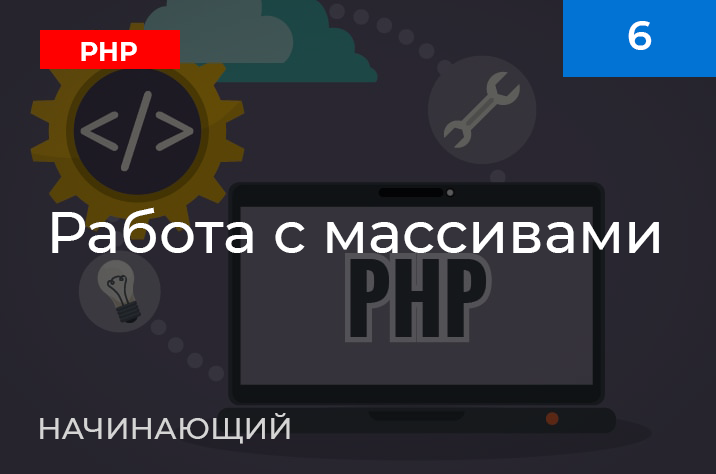
<style>
.page{position:relative;width:716px;height:474px}
.page>*{position:absolute;margin:0}
.t1{font:40px "Montserrat-SemiBold";color:#ffffff}
.t2{font:27px "Montserrat-Bold";color:#ffffff;scale:0.95 1}
.t3{font:58px "Montserrat-Medium";color:#ffffff}
.t4{font:30px "Montserrat-Medium";color:#d5d5d5}
</style>
<div class="page">
<p class="t1" style="left:628px;top:21px;width:24px;height:29px">6</p>
<p class="t2" style="left:81px;top:42px;width:56px;height:19px">PHP</p>
<p class="t3" style="left:52px;top:207px;width:607px;height:46px">Работа с массивами</p>
<p class="t4" style="left:40px;top:413px;width:250px;height:31px">НАЧИНАЮЩИЙ</p>
</div>
